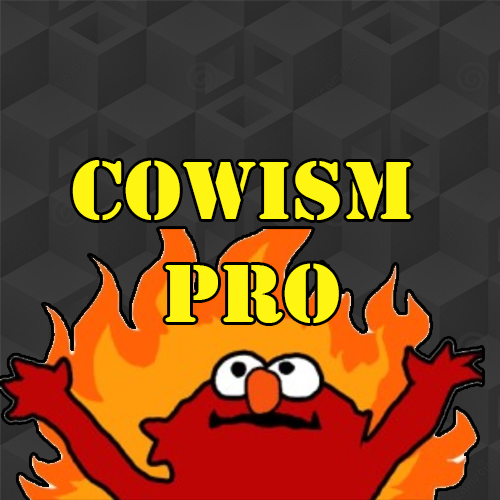
<style>
.page{position:relative;width:500px;height:500px}
.page>*{position:absolute;margin:0}
.t1{font:85.7px "Stencil";color:#fef612;scale:1.06 1}
</style>
<div class="page">
<p class="t1" style="left:72px;top:160px;width:339px;height:163px">COWISM <br>    PRO</p>
</div>
